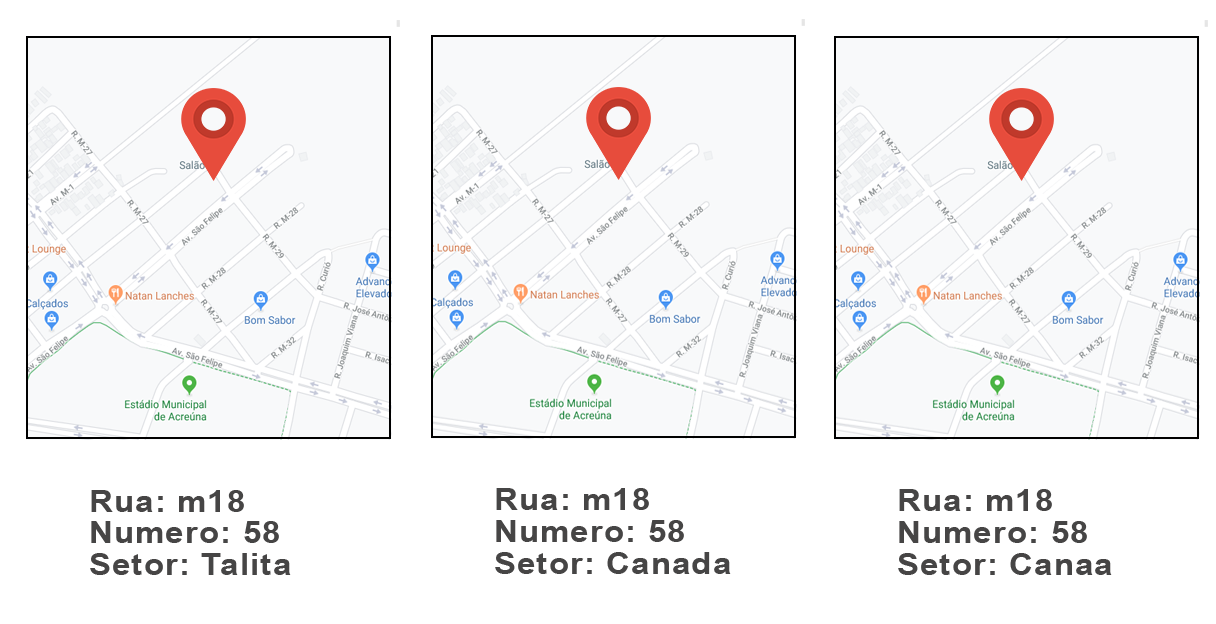
<style>
.page{position:relative;width:1216px;height:624px;background:#ffffff}
.page>*{position:absolute;margin:0}
.t1{font:30.4px/31.9px "Arial-BoldMT";letter-spacing:0.04em;color:#464545;scale:1.07 1}
</style>
<div class="page">
<p class="t1" style="left:90px;top:490px;width:201px;height:85px">Rua: m18<br>Numero: 58<br>Setor: Talita</p>
<p class="t1" style="left:495px;top:488px;width:236px;height:86px">Rua: m18<br>Numero: 58<br>Setor: Canada</p>
<p class="t1" style="left:898px;top:489px;width:214px;height:86px">Rua: m18<br>Numero: 58<br>Setor: Canaa</p>
</div>
